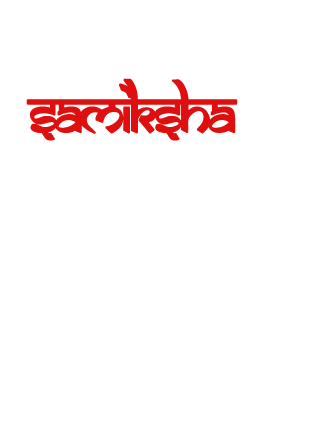
<style>
.page{position:relative;width:326px;height:434px;background:#ffffff}
.page>*{position:absolute;margin:0}
.t1{font:60px "SamarkanNormal";letter-spacing:-0.08em;color:#e00f0f;font-weight:bold}
</style>
<div class="page">
<p class="t1" style="left:26px;top:78px;width:212px;height:63px">SAMIKSHA</p>
</div>
